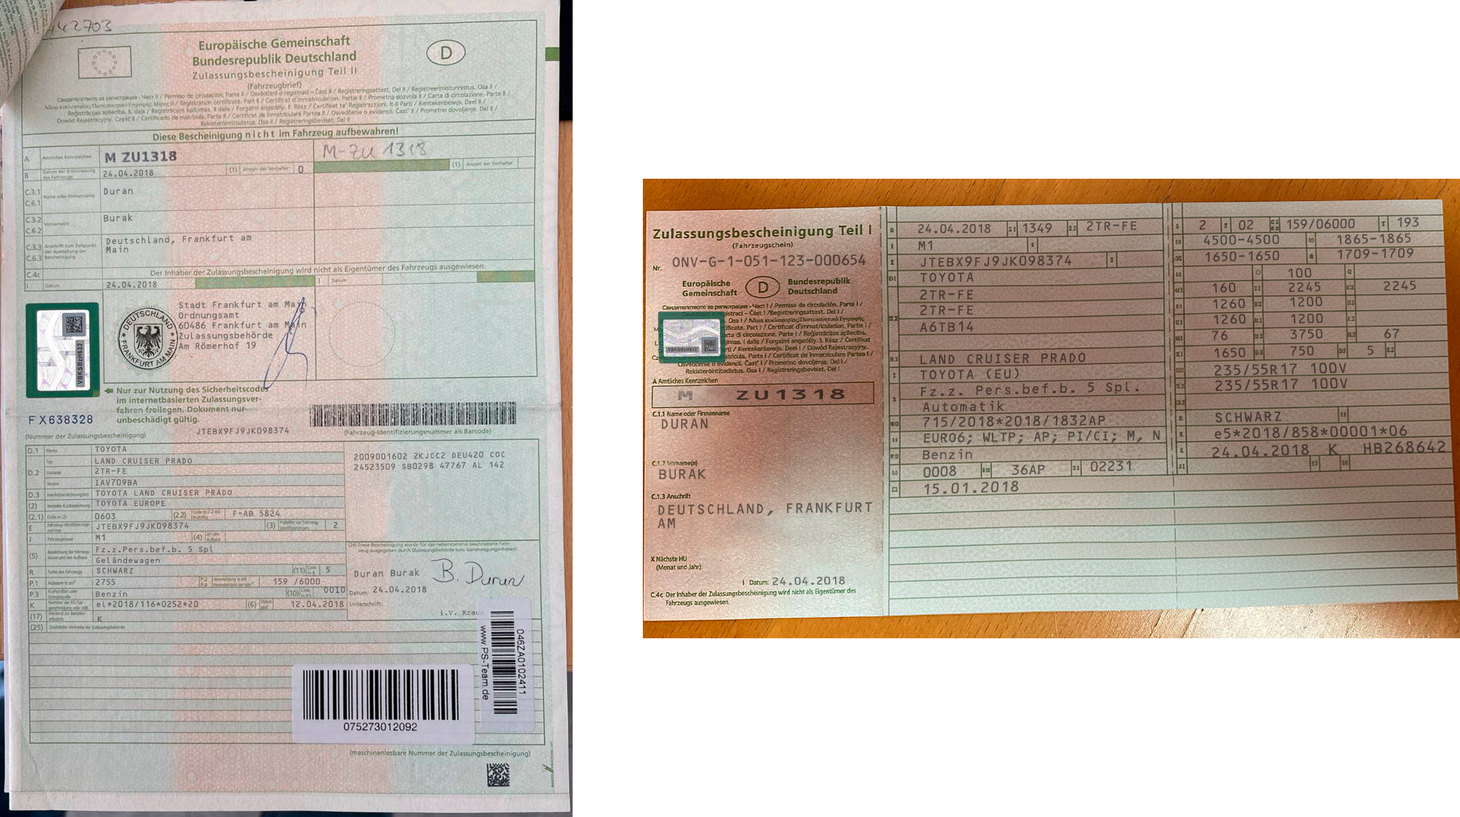
<style>
.page{position:relative;width:1460px;height:817px;background:#ffffff}
.page>*{position:absolute;margin:0}
.t1{font:6.3px "OCR-B";color:#696b68;scale:0.94 1}
.t2{font:7.5px "OCR-B";color:#6d706d;scale:0.94 1}
.t3{font:9.8px "OCR-B";color:#534841}
.t4{font:9.8px "OCR-B";letter-spacing:-0.075em;color:#4f413a;scale:1.07 1}
.t5{font:9.8px "OCR-B";letter-spacing:-0.075em;color:#51463d;scale:1.04 1}
.t6{font:9.8px "OCR-B";letter-spacing:-0.075em;color:#544b44}
.t7{font:9.8px "OCR-B";letter-spacing:-0.075em;color:#5c564f}
.t8{font:9.2px "OCR-B";letter-spacing:-0.075em;color:#574b44}
.t9{font:9.8px "OCR-B";letter-spacing:-0.075em;color:#564b44}
.t10{font:9.7px "OCR-B";color:#574d45;scale:1.04 1}
.t11{font:7.2px "OCR-B";color:#716f6c;scale:0.94 1}
.t12{font:10.1px "OCR-B";letter-spacing:-0.075em;color:#534b43}
.t13{font:9.7px "OCR-B";color:#504740;scale:1.06 1}
.t14{font:11.1px "OCR-B";letter-spacing:-0.075em;color:#5e483f}
.t15{font:10.2px "OCR-B";color:#4e4038}
.t16{font:9.8px "OCR-B";color:#4d3f37;scale:1.04 1}
.t17{font:9.8px "OCR-B";color:#52463e;scale:1.04 1}
.t18{font:9.8px "OCR-B";color:#4f423b;scale:1.04 1}
.t19{font:6.3px "OCR-B";color:#6c6d6b;scale:0.94 1}
.t20{font:10.5px "OCR-B";color:#4e413a}
.t21{font:9.8px "OCR-B";color:#4d4038;scale:1.04 1}
.t22{font:9.8px "OCR-B";color:#4e443c;scale:1.04 1}
.t23{font:10.5px "OCR-B";color:#4b3c35}
.t24{font:9.8px "OCR-B";color:#4b3c35;scale:1.04 1}
.t25{font:7px/10.2px "OCR-B";letter-spacing:-0.085em;color:#7b6d69}
.t26{font:10.5px "OCR-B";color:#4c3d36}
.t27{font:9.8px "OCR-B";color:#4c3f37;scale:1.04 1}
.t28{font:9.8px "OCR-B";color:#4e413a;scale:1.04 1}
.t29{font:9.8px "OCR-B";color:#4b3c34;scale:1.04 1}
.t30{font:9.8px "OCR-B";color:#4c3d36;scale:1.04 1}
.t31{font:10.5px "OCR-B";color:#4b3b34}
.t32{font:9.8px "OCR-B";color:#4d423a;scale:1.04 1}
.t33{font:9.8px "OCR-B";color:#4c3c35;scale:1.04 1}
.t34{font:10.5px "OCR-B";color:#4a3a32}
.t35{font:9.8px "OCR-B";color:#4a3a33;scale:1.04 1}
.t36{font:9.8px "OCR-B";color:#493c34;scale:1.04 1}
.t37{font:9.8px "OCR-B";color:#4b4037;scale:1.04 1}
.t38{font:11px/15.3px "OCR-B";color:#4a3d35;scale:1.04 1}
.t39{font:10.5px "OCR-B";color:#4b3e36}
.t40{font:10px "OCR-B";color:#402b24;font-weight:bold;scale:2.14 1}
.t41{font:10.5px "OCR-B";color:#4a3a33}
.t42{font:10.5px "OCR-B";color:#4b3d36}
.t43{font:11px "OCR-B";color:#483d35;scale:1.04 1}
.t44{font:11.1px "OCR-B";color:#6b554a}
.t45{font:10.5px "OCR-B";color:#4d413a}
.t46{font:11px "OCR-B";color:#493d35;scale:1.04 1}
.t47{font:6.3px "OCR-B";color:#736562}
.t48{font:10.5px "OCR-B";letter-spacing:-0.075em;color:#534b43}
.t49{font:6.3px "OCR-B";color:#696a68}
.t50{font:10.5px "OCR-B";letter-spacing:-0.075em;color:#595149}
.t51{font:11px "OCR-B";color:#493c35;scale:1.04 1}
.t52{font:12.6px "OCR-B";color:#463a31;scale:1.04 1}
.t53{font:11.8px "OCR-B";color:#483b33;scale:1.04 1}
.t54{font:6.3px "OCR-B";color:#6a6865}
.t55{font:6.3px "OCR-B";color:#6c6f6d}
.t56{font:6.3px "OCR-B";color:#6b6e6c}
.t57{font:10.5px "OCR-B";letter-spacing:-0.075em;color:#5c554d;scale:1.04 1}
.t58{font:6.3px "OCR-B";color:#686b68}
.t59{font:11.1px "OCR-B";color:#695247}
.t60{font:10.5px "OCR-B";letter-spacing:-0.075em;color:#5d5b52;scale:1.04 1}
.t61{font:10.5px "OCR-B";letter-spacing:-0.075em;color:#615952;scale:1.04 1}
.t62{font:6.3px "OCR-B";color:#686866}
.t63{font:11px "OCR-B";color:#615b53;scale:1.04 1}
.t64{font:6.3px "OCR-B";color:#6c6865}
.t65{font:6.3px "OCR-B";color:#666564}
.t66{font:6.3px "OCR-B";color:#736b66}
.t67{font:11.1px "OCR-B";color:#65564c}
.t68{font:6.3px "OCR-B";color:#696b69}
.t69{font:6.3px "OCR-B";color:#686764}
.t70{font:6.3px "OCR-B";color:#676664}
.t71{font:6.3px "OCR-B";color:#666665}
.t72{font:6.3px "OCR-B";color:#656563}
.t73{font:6.3px "OCR-B";color:#646562}
.t74{font:7.5px "OCR-B";color:#6c6967;scale:0.94 1}
.t75{font:6.3px "OCR-B";color:#666867}
.t76{font:6.3px "OCR-B";color:#726663}
.t77{font:8.1px "OCR-B";letter-spacing:-0.075em;color:#6e716c;scale:1.16 1}
.t78{font:6.3px "OCR-B";color:#666766}
.t79{font:6.3px "OCR-B";color:#6a6968}
.t80{font:6.3px "OCR-B";color:#6e645f}
.t81{font:6.3px "OCR-B";color:#616160}
</style>
<div class="page">
<p class="t1" style="left:103px;top:169px;width:50px;height:8px;rotate:-2deg">24.04.2018</p>
<p class="t2" style="left:103px;top:188px;width:30px;height:34px;rotate:-2deg">Duran<br><br><br>Burak</p>
<p class="t3" style="left:1086px;top:221px;width:50px;height:10px;rotate:-1deg">2TR-FE</p>
<p class="t4" style="left:1199px;top:220px;width:7px;height:10px;rotate:-5deg">2</p>
<p class="t5" style="left:1238px;top:220px;width:15px;height:10px;rotate:-3deg">02</p>
<p class="t6" style="left:1287px;top:218px;width:67px;height:11px;rotate:-1deg">159/06000</p>
<p class="t7" style="left:1398px;top:217px;width:20px;height:10px;rotate:-1deg">193</p>
<p class="t8" style="left:918px;top:224px;width:73px;height:10px">24.04.2018</p>
<p class="t9" style="left:1022px;top:223px;width:30px;height:10px">1349</p>
<p class="t10" style="left:1336px;top:233px;width:74px;height:11px;rotate:-1deg">1865-1865</p>
<p class="t11" style="left:106px;top:234px;width:145px;height:19px;rotate:-2deg">Deutschland, Frankfurt am<br>Main</p>
<p class="t12" style="left:918px;top:241px;width:14px;height:9px">M1</p>
<p class="t13" style="left:1204px;top:234px;width:75px;height:11px;rotate:-1deg">4500-4500</p>
<p class="t14" style="left:672px;top:254px;width:193px;height:13px;rotate:-1deg">ONV-G-1-051-123-000654</p>
<p class="t15" style="left:920px;top:255px;width:151px;height:12px;rotate:-1deg">JTEBX9FJ9JK098374</p>
<p class="t16" style="left:1206px;top:250px;width:73px;height:12px;rotate:-1deg">1650-1650</p>
<p class="t17" style="left:1338px;top:248px;width:75px;height:11px;rotate:-1deg">1709-1709</p>
<p class="t18" style="left:1288px;top:267px;width:23px;height:11px;rotate:-1deg">100</p>
<p class="t19" style="left:107px;top:281px;width:50px;height:7px;rotate:-1deg">24.04.2018</p>
<p class="t20" style="left:920px;top:272px;width:53px;height:11px;rotate:-1deg">TOYOTA</p>
<p class="t21" style="left:1288px;top:281px;width:33px;height:11px;rotate:-1deg">2245</p>
<p class="t22" style="left:1384px;top:280px;width:32px;height:11px;rotate:-1deg">2245</p>
<p class="t23" style="left:920px;top:289px;width:53px;height:11px;rotate:-1deg">2TR-FE</p>
<p class="t24" style="left:1212px;top:282px;width:24px;height:11px;rotate:-1deg">160</p>
<p class="t25" style="left:179px;top:300px;width:127px;height:50px;rotate:-1deg">Stadt Frankfurt am Main <br>Ordnungsamt <br>60486 Frankfurt am Main <br>Zulassungsbehörde <br>Am Römerhof 19</p>
<p class="t26" style="left:920px;top:304px;width:53px;height:11px;rotate:-1deg">2TR-FE</p>
<p class="t27" style="left:1213px;top:298px;width:32px;height:11px;rotate:-1deg">1260</p>
<p class="t28" style="left:1290px;top:296px;width:32px;height:11px;rotate:-1deg">1200</p>
<p class="t29" style="left:1213px;top:314px;width:32px;height:10px;rotate:-1deg">1260</p>
<p class="t30" style="left:1291px;top:313px;width:31px;height:11px;rotate:-1deg">1200</p>
<p class="t31" style="left:920px;top:321px;width:53px;height:11px;rotate:-1deg">A6TB14</p>
<p class="t16" style="left:1290px;top:329px;width:32px;height:10px;rotate:-1deg">3750</p>
<p class="t32" style="left:1384px;top:329px;width:15px;height:10px;rotate:-1deg">67</p>
<p class="t33" style="left:1211px;top:331px;width:16px;height:9px;rotate:-1deg">76</p>
<p class="t34" style="left:920px;top:352px;width:165px;height:12px;rotate:-1deg">LAND CRUISER PRADO</p>
<p class="t35" style="left:1214px;top:347px;width:31px;height:11px;rotate:-1deg">1650</p>
<p class="t36" style="left:1290px;top:345px;width:23px;height:11px;rotate:-1deg">750</p>
<p class="t37" style="left:1367px;top:345px;width:6px;height:10px;rotate:-1deg">5</p>
<p class="t38" style="left:1214px;top:362px;width:133px;height:29px;rotate:-1deg">235/55R17 100V<br>235/55R17 100V</p>
<p class="t39" style="left:920px;top:368px;width:99px;height:12px;rotate:-1deg">TOYOTA (EU)</p>
<p class="t40" style="left:678px;top:389px;width:166px;height:11px">M  ZU1318</p>
<p class="t41" style="left:920px;top:381px;width:219px;height:15px;rotate:-1deg">Fz.z. Pers.bef.b. 5 Spl.</p>
<p class="t42" style="left:922px;top:400px;width:82px;height:12px;rotate:-1deg">Automatik</p>
<p class="t43" style="left:1215px;top:411px;width:66px;height:12px;rotate:-1deg">SCHWARZ</p>
<p class="t44" style="left:661px;top:418px;width:47px;height:11px;rotate:-1deg">DURAN</p>
<p class="t45" style="left:923px;top:415px;width:182px;height:13px;rotate:-1deg">715/2018*2018/1832AP<br>/1832AP<br>weckfahrzeug</p>
<p class="t46" style="left:1215px;top:425px;width:192px;height:14px;rotate:-1deg">e5*2018/858*00001*06</p>
<p class="t47" style="left:197px;top:427px;width:92px;height:8px;rotate:-1deg">JTEBX9FJ9JK098374</p>
<p class="t48" style="left:924px;top:430px;width:236px;height:15px;rotate:-1deg">EURO6; WLTP; AP; PI/CI; M, N</p>
<p class="t49" style="left:95px;top:446px;width:31px;height:7px">TOYOTA</p>
<p class="t50" style="left:922px;top:449px;width:50px;height:11px;rotate:-1deg">Benzin</p>
<p class="t51" style="left:1212px;top:444px;width:96px;height:14px;rotate:-2deg">24.04.2018</p>
<p class="t52" style="left:1328px;top:444px;width:10px;height:11px;rotate:-2deg">K</p>
<p class="t53" style="left:1363px;top:440px;width:82px;height:14px;rotate:-1deg">HB268642</p>
<p class="t54" style="left:95px;top:458px;width:97px;height:6px">LAND CRUISER PRADO</p>
<p class="t55" style="left:354px;top:451px;width:151px;height:9px;rotate:-1deg">2009001602 2KJCC2 DEU420 COC JA</p>
<p class="t56" style="left:354px;top:461px;width:150px;height:9px;rotate:-1deg">24523509 SB0298 47767 AL 142</p>
<p class="t57" style="left:1090px;top:460px;width:41px;height:12px;rotate:-2deg">02231</p>
<p class="t58" style="left:95px;top:467px;width:31px;height:7px">2TR-FE</p>
<p class="t59" style="left:659px;top:468px;width:47px;height:11px;rotate:-1deg">BURAK</p>
<p class="t60" style="left:923px;top:465px;width:33px;height:12px;rotate:-3deg">0008</p>
<p class="t61" style="left:1012px;top:464px;width:33px;height:11px;rotate:-2deg">36AP</p>
<p class="t62" style="left:95px;top:479px;width:42px;height:7px">IAV709BA</p>
<p class="t63" style="left:924px;top:481px;width:94px;height:14px;rotate:-2deg">15.01.2018</p>
<p class="t64" style="left:96px;top:490px;width:136px;height:7px">TOYOTA LAND CRUISER PRADO</p>
<p class="t65" style="left:96px;top:500px;width:69px;height:6px">TOYOTA EUROPE</p>
<p class="t66" style="left:233px;top:510px;width:47px;height:6px">F-AB 5824</p>
<p class="t67" style="left:657px;top:502px;width:215px;height:26px;rotate:-1deg">DEUTSCHLAND, FRANKFURT AM<br>MAINMAINam<br>Main</p>
<p class="t68" style="left:95px;top:513px;width:21px;height:7px">0603</p>
<p class="t69" style="left:334px;top:521px;width:4px;height:7px">2</p>
<p class="t62" style="left:96px;top:522px;width:93px;height:8px;rotate:-1deg">JTEBX9FJ9JK098374</p>
<p class="t68" style="left:96px;top:534px;width:9px;height:7px">M1</p>
<p class="t70" style="left:96px;top:546px;width:117px;height:8px">Fz.z.Pers.bef.b. 5 Spl</p>
<p class="t71" style="left:96px;top:557px;width:64px;height:8px">Geländewagen</p>
<p class="t72" style="left:96px;top:567px;width:37px;height:7px">SCHWARZ</p>
<p class="t73" style="left:326px;top:566px;width:4px;height:7px">5</p>
<p class="t74" style="left:354px;top:568px;width:65px;height:10px;rotate:-2deg">Duran Burak</p>
<p class="t75" style="left:96px;top:579px;width:20px;height:6px">2755</p>
<p class="t76" style="left:274px;top:578px;width:46px;height:7px">159 /6000</p>
<p class="t77" style="left:772px;top:576px;width:73px;height:9px;rotate:-1deg">24.04.2018</p>
<p class="t78" style="left:96px;top:590px;width:31px;height:7px">Benzin</p>
<p class="t79" style="left:373px;top:586px;width:53px;height:7px">24.04.2018</p>
<p class="t65" style="left:96px;top:601px;width:102px;height:7px">el*2018/116*0252*20</p>
<p class="t80" style="left:291px;top:601px;width:53px;height:7px">12.04.2018</p>
<p class="t81" style="left:98px;top:616px;width:5px;height:6px">K</p>
</div>
